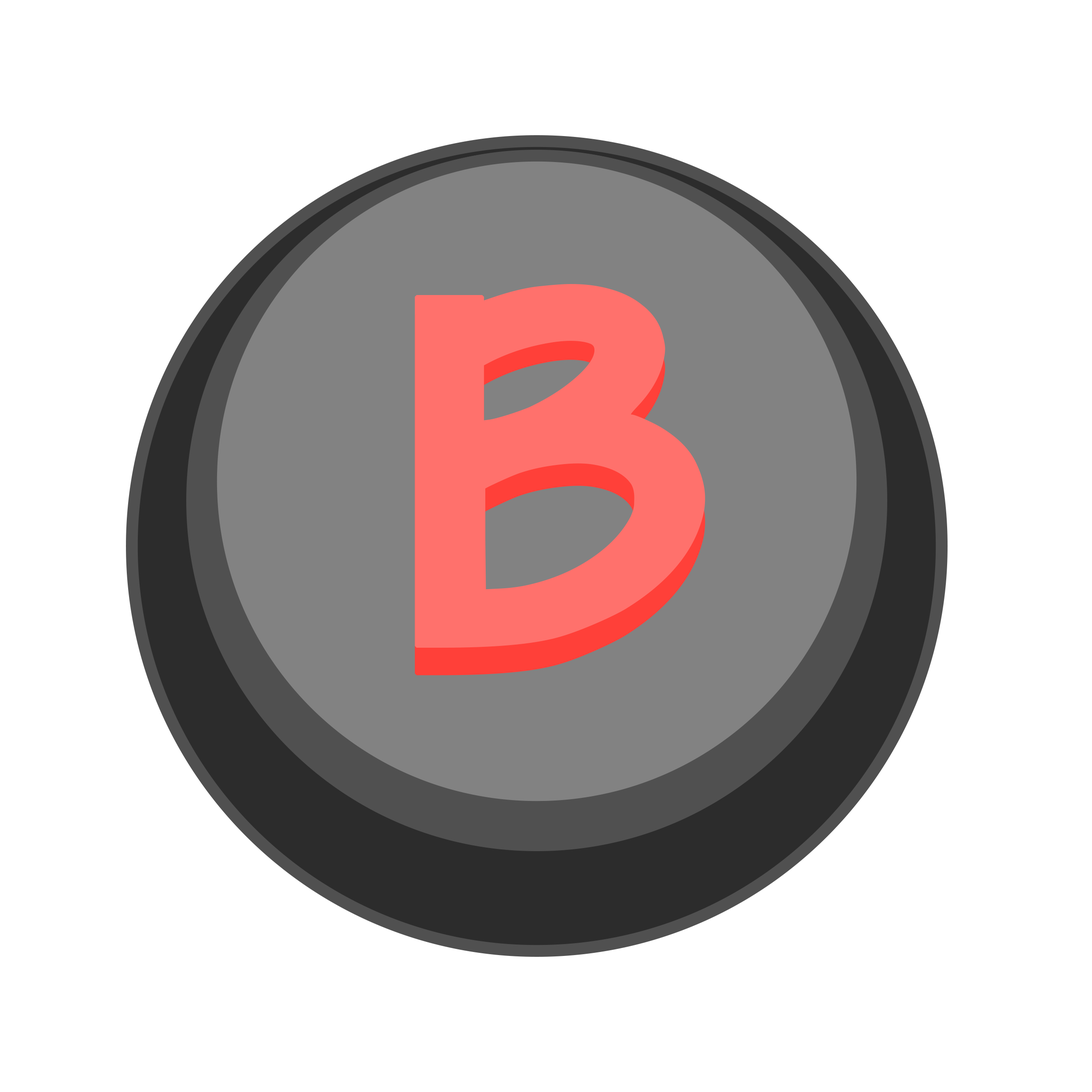
<style>
.page{position:relative;width:1092px;height:1092px;background:#ffffff}
.page>*{position:absolute;margin:0}
.t1{font:537.7px "Pumkinpie";letter-spacing:0.1em;color:#ff716c;font-weight:bold;scale:1.24 1}
.t2{font:552.8px "Pumkinpie";letter-spacing:0.1em;color:#ff716c;font-weight:bold;scale:1.21 1}
</style>
<div class="page">
<p class="t1" style="left:415px;top:284px;width:290px;height:364px">B</p>
<p class="t2" style="left:415px;top:301px;width:290px;height:374px">B</p>
</div>
